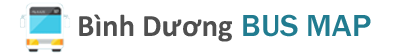
<style>
.page{position:relative;width:400px;height:55px;background:#ffffff}
.page>*{position:absolute;margin:0}
.t1{font:31.2px "Calibri-Bold";color:#4f4f4f}
.t2{font:31.6px "FranklinGothic-Medium";color:#217c90}
</style>
<div class="page">
<p class="t1" style="left:79px;top:14px;width:153px;height:28px">Bình Dương</p>
<p class="t2" style="left:243px;top:14px;width:128px;height:23px">BUS MAP</p>
</div>
